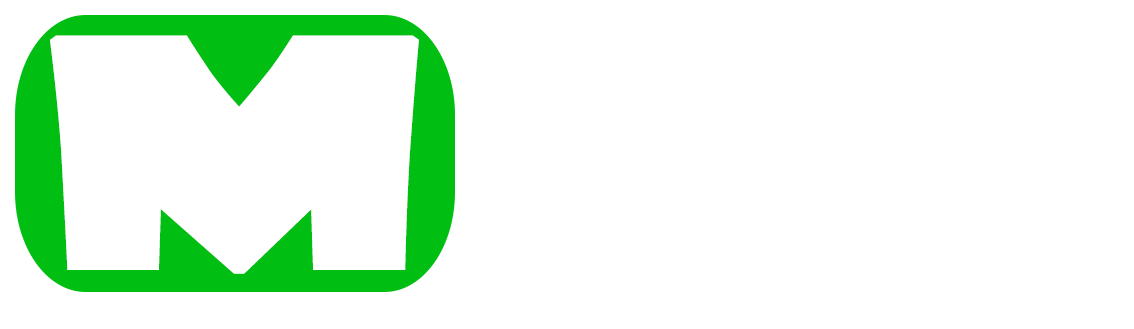
<style>
.page{position:relative;width:1134px;height:329px;background:#ffffff}
.page>*{position:absolute;margin:0}
.t1{font:301.4px "ShowcardGothic-Reg";color:#ffffff;font-weight:bold;scale:1.5 1}
</style>
<div class="page">
<p class="t1" style="left:50px;top:35px;width:369px;height:239px">M</p>
</div>
